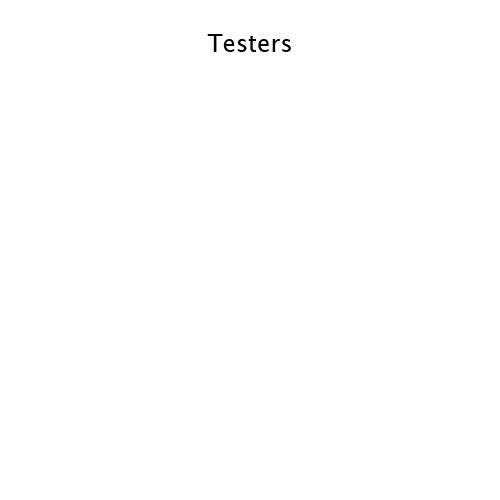
<style>
.page{position:relative;width:500px;height:500px;background:#ffffff}
.page>*{position:absolute;margin:0}
.t1{font:24px "LucidaGrande";color:#000000}
</style>
<div class="page">
<p class="t1" style="left:207px;top:34px;width:84px;height:18px">Testers</p>
</div>
